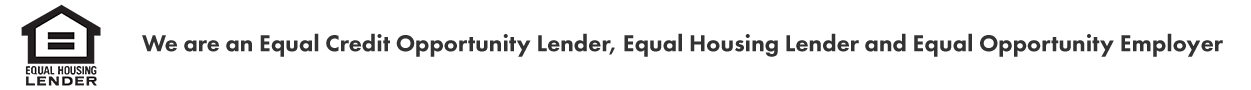
<style>
.page{position:relative;width:1251px;height:90px;background:#ffffff}
.page>*{position:absolute;margin:0}
.t1{font:24px "FuturaPT-Heavy";color:#333333}
</style>
<div class="page">
<p class="t1" style="left:142px;top:33px;width:1081px;height:24px">We are an Equal Credit Opportunity Lender, Equal Housing Lender and Equal Opportunity Employer</p>
</div>
